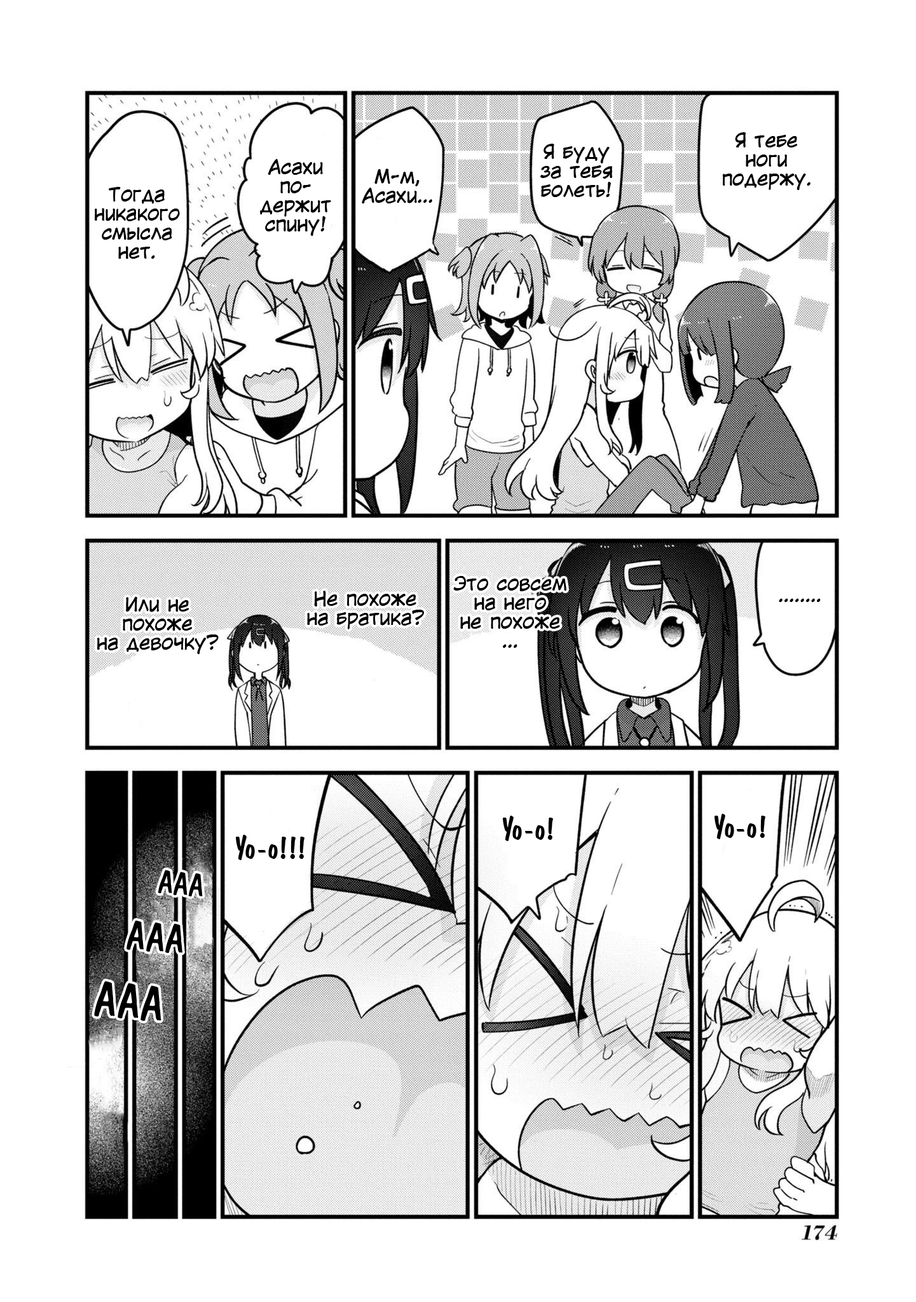
<style>
.page{position:relative;width:916px;height:1302px;background:#ffffff}
.page>*{position:absolute;margin:0}
.t1{font:19.1px/19.1px "KuraiVoice2";color:#000000}
.t2{font:19.1px "KuraiVoice2";color:#000000}
.t3{font:30.5px "ADomIno";color:#000000}
.t4{font:38.1px "ADomIno";color:#000000}
.t5{font:45.8px "ADomIno";color:#000000}
</style>
<div class="page">
<p class="t1" style="left:722px;top:132px;width:88px;height:58px;text-align:center">Я тебе<br>ноги<br>подержу.</p>
<p class="t1" style="left:540px;top:144px;width:73px;height:53px;text-align:center">Я буду<br>за тебя болеть!</p>
<p class="t1" style="left:260px;top:159px;width:71px;height:77px;text-align:center">Асахи по-<br>держит спину!</p>
<p class="t1" style="left:362px;top:168px;width:70px;height:35px;text-align:center">М-м,<br>Асахи...</p>
<p class="t1" style="left:94px;top:187px;width:86px;height:72px;text-align:center">Тогда никакого смысла нет.</p>
<p class="t1" style="left:453px;top:576px;width:113px;height:72px;text-align:center">Это совсем<br>на него<br>не похоже<br>...</p>
<p class="t1" style="left:307px;top:591px;width:117px;height:38px;text-align:center">Не похоже<br>на братика?</p>
<p class="t1" style="left:97px;top:596px;width:122px;height:58px;text-align:center">Или не<br>похоже<br>на девочку?</p>
<p class="t2" style="left:779px;top:598px;width:42px;height:4px">........</p>
<p class="t3" style="left:503px;top:816px;width:50px;height:25px">Уо-о!</p>
<p class="t3" style="left:714px;top:814px;width:51px;height:25px">Уо-о!</p>
<p class="t3" style="left:236px;top:835px;width:68px;height:25px">Уо-о!!!</p>
<p class="t3" style="left:158px;top:870px;width:45px;height:26px;rotate:5deg">ААА</p>
<p class="t4" style="left:126px;top:920px;width:56px;height:33px;rotate:5deg">ААА</p>
<p class="t5" style="left:94px;top:981px;width:67px;height:40px;rotate:5deg">ААА</p>
</div>
